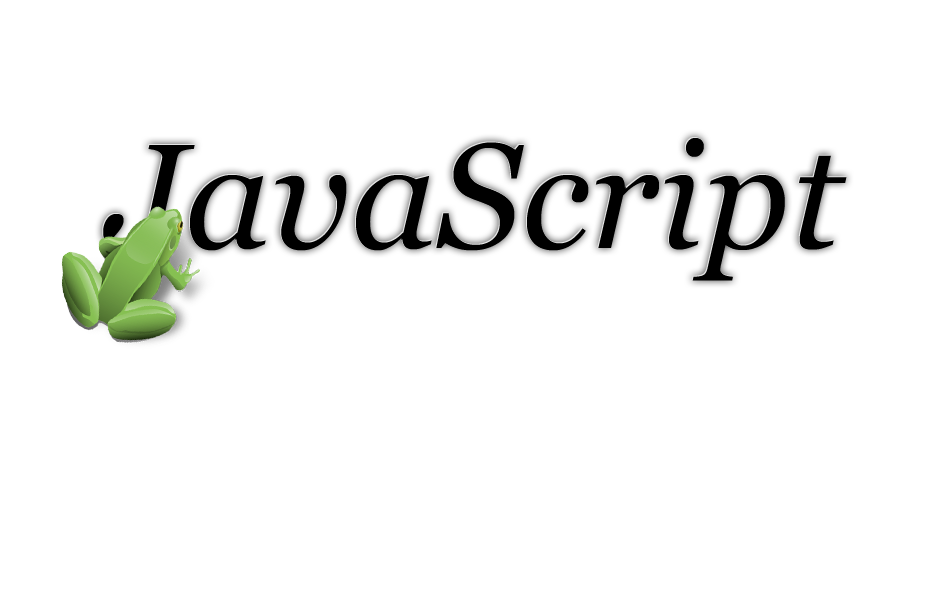
<style>
.page{position:relative;width:950px;height:600px;background:#ffffff}
.page>*{position:absolute;margin:0}
.t1{font:150.2px "Georgia-Italic";color:#000000}
</style>
<div class="page">
<p class="t1" style="left:102px;top:137px;width:745px;height:144px">JavaScript</p>
</div>
